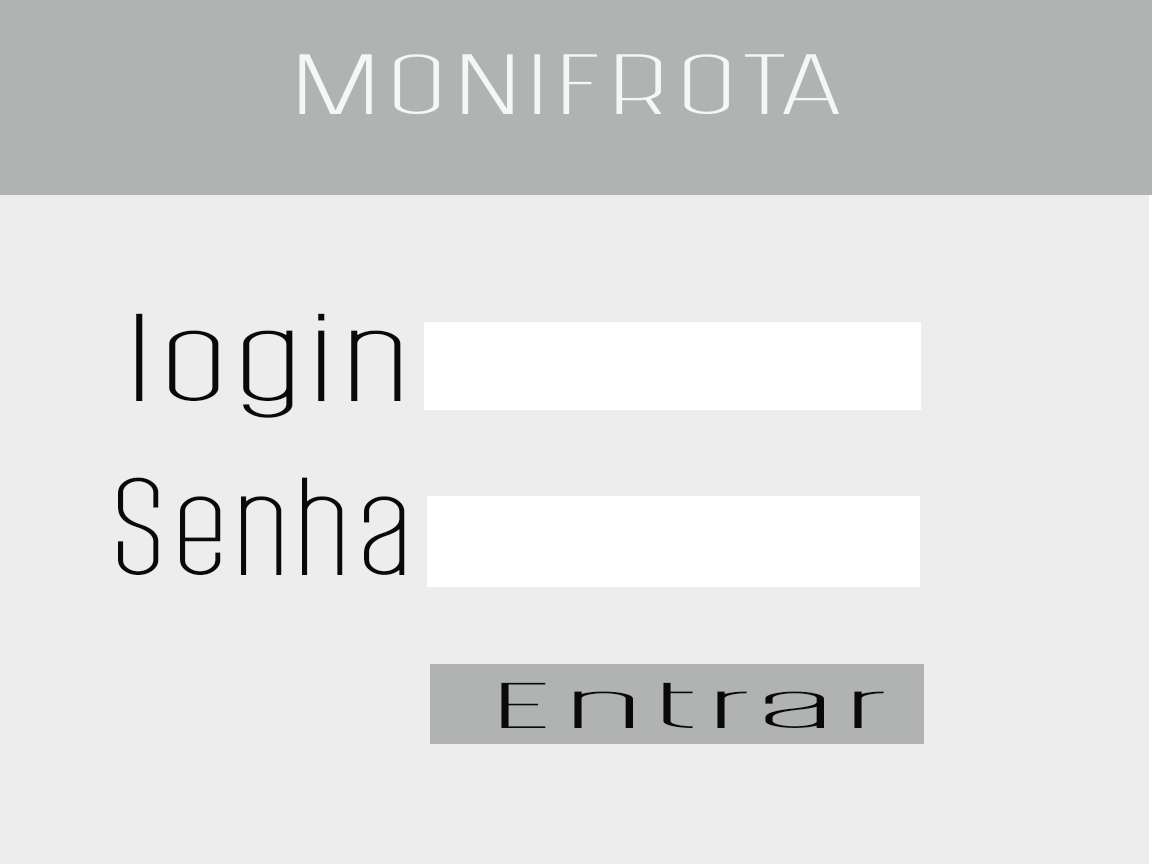
<style>
.page{position:relative;width:1152px;height:864px;background:#ededed}
.page>*{position:absolute;margin:0}
.t1{font:64.3px "PostScriptum-Light";color:#f5f7f5;scale:2.42 1}
.t2{font:93.9px "PostScriptum-Light";color:#090909;scale:1.84 1}
.t3{font:104.9px "PostScriptum-Light";color:#090909;scale:1.34 1}
.t4{font:48.6px "PostScriptum-Light";color:#090909;scale:4.22 1}
</style>
<div class="page">
<p class="t1" style="left:299px;top:54px;width:540px;height:60px">MONIFROTA</p>
<p class="t2" style="left:136px;top:313px;width:265px;height:105px">login</p>
<p class="t3" style="left:118px;top:477px;width:287px;height:98px">Senha</p>
<p class="t4" style="left:501px;top:682px;width:383px;height:46px">Entrar</p>
</div>
